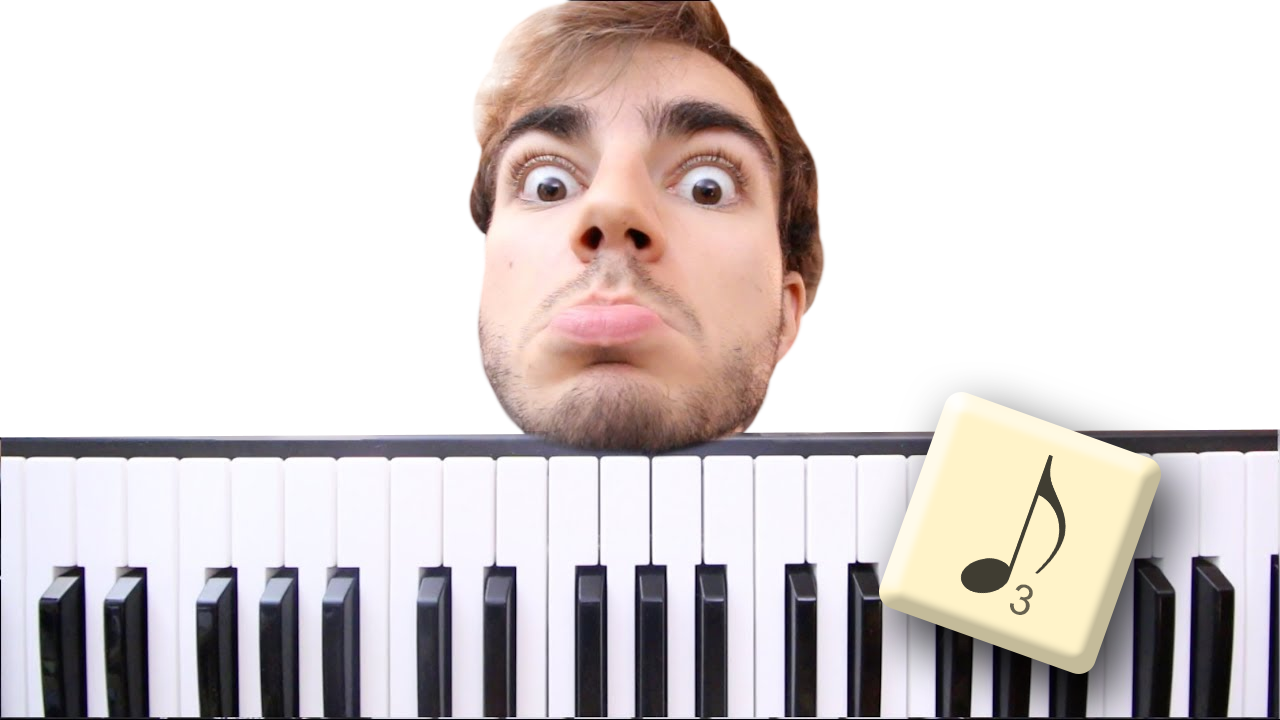
<style>
.page{position:relative;width:1280px;height:720px;background:#ffffff}
.page>*{position:absolute;margin:0}
.t1{font:42.3px "ArialMT";color:#67614f;font-variant:small-caps}
</style>
<div class="page">
<p class="t1" style="left:1010px;top:584px;width:23px;height:31px;rotate:20deg">3</p>
</div>
